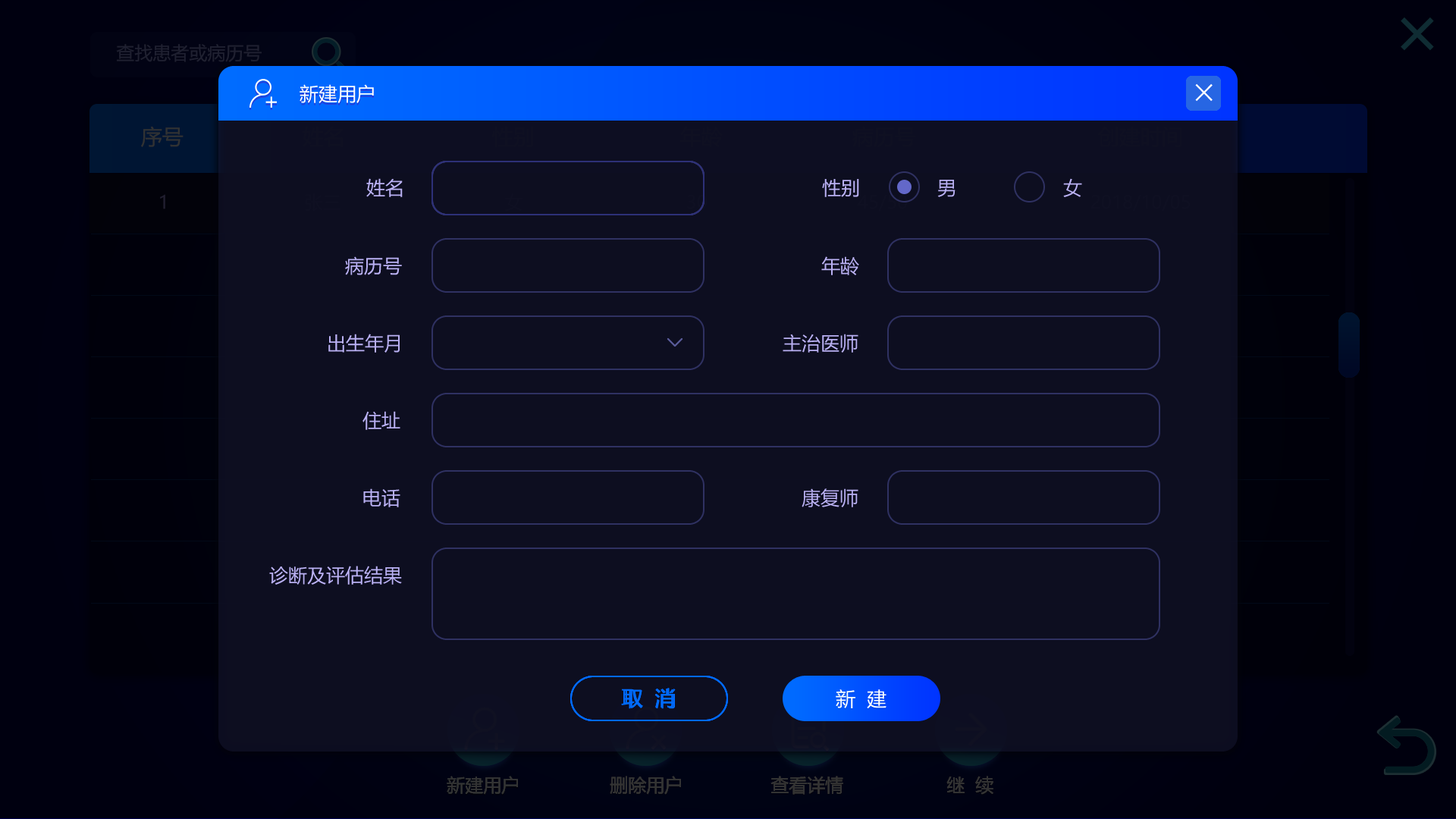
<style>
.page{position:relative;width:1456px;height:819px;background:#0d0e20}
.page>*{position:absolute;margin:0}
.t1{font:19px "MicrosoftYaHei";color:#ffffff}
.t2{font:40.9px "MicrosoftYaHeiLight";color:#ffffff}
.t3{font:19px "MicrosoftYaHei";color:#bab1f4}
.t4{font:21.2px "MicrosoftYaHei";color:#006bff}
.t5{font:19.7px "MicrosoftYaHei";color:#006bff}
.t6{font:19.7px "MicrosoftYaHei";color:#ffffff}
</style>
<div class="page">
<p class="t1" style="left:300px;top:84px;width:74px;height:20px">新建用户</p>
<p class="t2" style="left:1195px;top:83px;width:18px;height:19px">×</p>
<p class="t2" style="left:1195px;top:83px;width:18px;height:19px">×</p>
<p class="t2" style="left:1195px;top:83px;width:18px;height:19px">×</p>
<p class="t3" style="left:366px;top:178px;width:37px;height:19px">姓名</p>
<p class="t3" style="left:822px;top:179px;width:37px;height:18px">性别</p>
<p class="t3" style="left:937px;top:180px;width:18px;height:17px">男</p>
<p class="t3" style="left:1063px;top:178px;width:19px;height:19px">女</p>
<p class="t3" style="left:345px;top:256px;width:57px;height:19px">病历号</p>
<p class="t3" style="left:821px;top:256px;width:38px;height:19px">年龄</p>
<p class="t3" style="left:328px;top:334px;width:72px;height:19px">出生年月</p>
<p class="t3" style="left:783px;top:334px;width:75px;height:19px">主治医师</p>
<p class="t3" style="left:362px;top:411px;width:38px;height:19px">住址</p>
<p class="t3" style="left:363px;top:488px;width:37px;height:19px">电话</p>
<p class="t3" style="left:802px;top:488px;width:56px;height:19px">康复师</p>
<p class="t3" style="left:269px;top:566px;width:133px;height:19px">诊断及评估结果</p>
<p class="t4" style="left:621px;top:688px;width:55px;height:21px">取  消</p>
<p class="t5" style="left:623px;top:689px;width:50px;height:19px">取  消</p>
<p class="t5" style="left:623px;top:689px;width:50px;height:19px">取  消</p>
<p class="t6" style="left:836px;top:689px;width:50px;height:20px">新  建</p>
</div>
